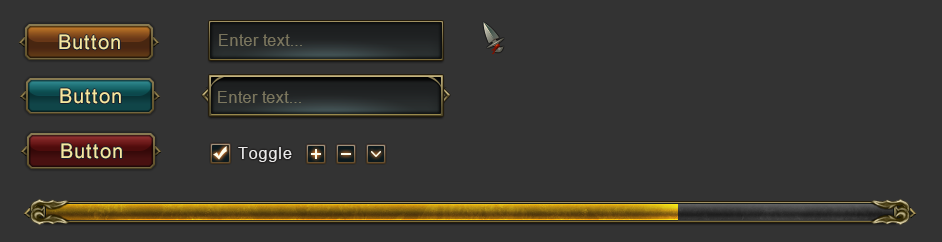
<style>
.page{position:relative;width:942px;height:242px;background:#333333}
.page>*{position:absolute;margin:0}
.t1{font:20px "ArialMT";letter-spacing:0.05em;color:#f6e79f}
.t2{font:16px "ArialMT";letter-spacing:0.03em;color:#7b765e}
.t3{font:16px "ArialMT";letter-spacing:0.03em;color:#7c775f}
.t4{font:16px "ArialMT";letter-spacing:0.05em;color:#e8e8e8}
</style>
<div class="page">
<p class="t1" style="left:59px;top:34px;width:61px;height:16px">Button</p>
<p class="t2" style="left:219px;top:34px;width:83px;height:12px">Enter text...</p>
<p class="t1" style="left:60px;top:88px;width:61px;height:16px">Button</p>
<p class="t3" style="left:218px;top:91px;width:83px;height:12px">Enter text...</p>
<p class="t1" style="left:61px;top:143px;width:61px;height:16px">Button</p>
<p class="t4" style="left:238px;top:147px;width:54px;height:15px">Toggle</p>
</div>
